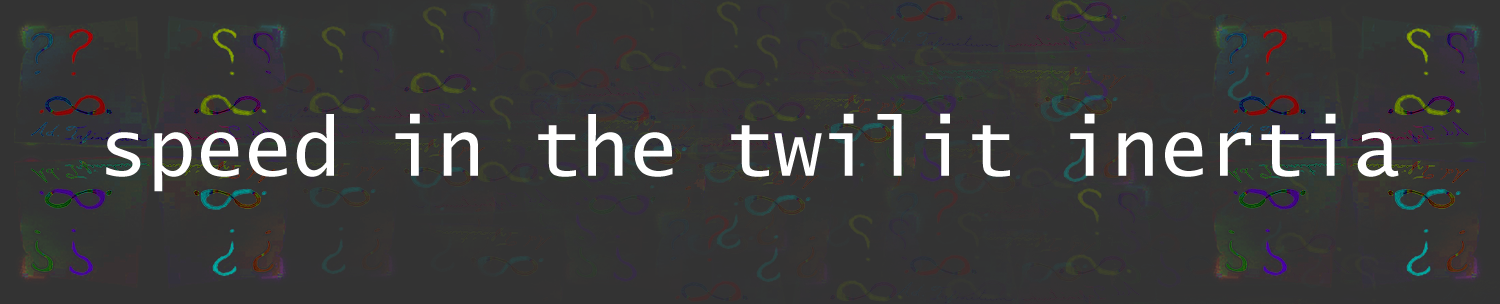
<style>
.page{position:relative;width:1500px;height:304px;background:#333333}
.page>*{position:absolute;margin:0}
.t1{font:80px "LucidaSans-Typewriter";color:#ffffff}
</style>
<div class="page">
<p class="t1" style="left:106px;top:113px;width:1293px;height:79px">speed in the twilit inertia</p>
</div>
